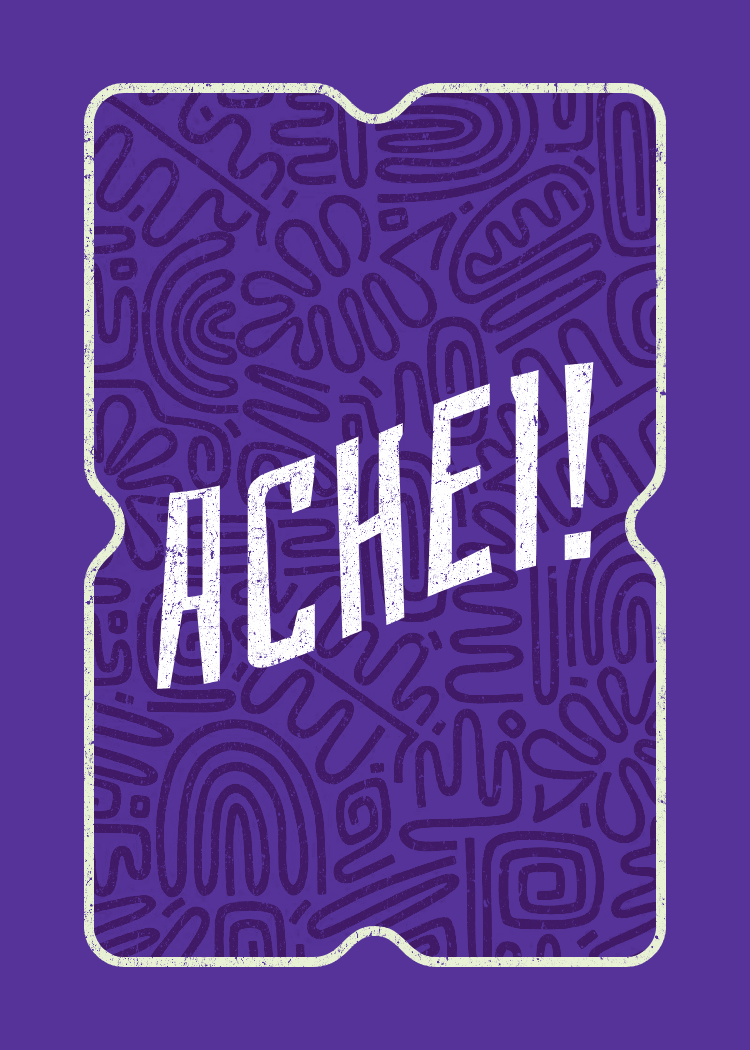
<style>
.page{position:relative;width:750px;height:1050px;background:#553399}
.page>*{position:absolute;margin:0}
.t1{font:275px "Bahiana-Regular";color:#ffffff}
</style>
<div class="page">
<p class="t1" style="left:157px;top:362px;width:437px;height:327px">ACHEI!</p>
</div>
